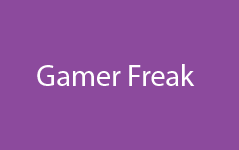
<style>
.page{position:relative;width:239px;height:150px;background:#8c4a9d}
.page>*{position:absolute;margin:0}
.t1{font:30.2px "MyriadPro-Regular";color:#ffffff}
</style>
<div class="page">
<p class="t1" style="left:37px;top:64px;width:158px;height:22px">Gamer Freak</p>
</div>
